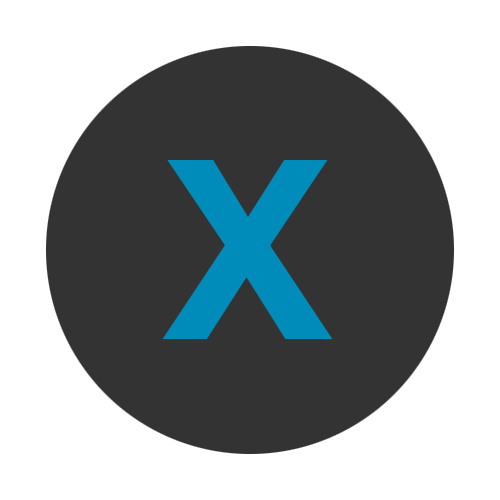
<style>
.page{position:relative;width:500px;height:500px;background:#ffffff}
.page>*{position:absolute;margin:0}
.t1{font:250px "HelveticaNeue-Bold";color:#008cba}
</style>
<div class="page">
<p class="t1" style="left:162px;top:160px;width:171px;height:179px">X</p>
</div>
